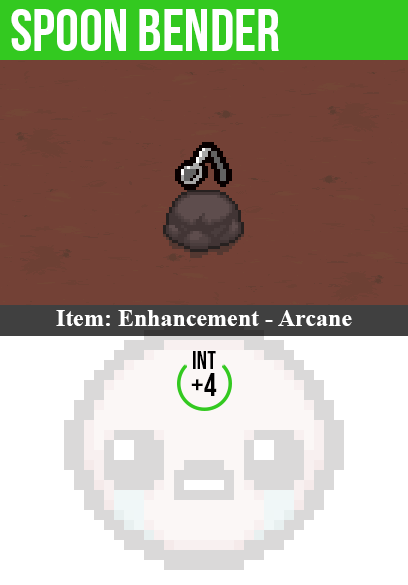
<style>
.page{position:relative;width:408px;height:585px;background:#734136}
.page>*{position:absolute;margin:0}
.t1{font:60px "BebasNeue";color:#ffffff}
.t2{font:24px "TimesNewRomanPS-BoldMT";color:#ffffff}
.t3{font:25px "BebasNeue";color:#000000}
.t4{font:32px "BebasNeue";color:#000000}
</style>
<div class="page">
<p class="t1" style="left:11px;top:9px;width:268px;height:42px">spoon bender</p>
<p class="t2" style="left:56px;top:310px;width:296px;height:16px">Item: Enhancement - Arcane</p>
<p class="t3" style="left:193px;top:351px;width:23px;height:18px">int</p>
<p class="t4" style="left:191px;top:373px;width:26px;height:23px">+4</p>
</div>
